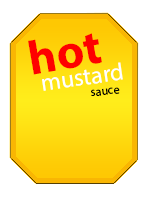
<style>
.page{position:relative;width:150px;height:200px;background:#ffffff}
.page>*{position:absolute;margin:0}
.t1{font:48px "MyriadPro-Bold";color:#fe0000}
.t2{font:24px "MyriadPro-Regular";color:#ffffff}
.t3{font:12px "MyriadPro-Regular";color:#000000}
</style>
<div class="page">
<p class="t1" style="left:28px;top:33px;width:74px;height:42px;rotate:-10deg">hot</p>
<p class="t2" style="left:42px;top:62px;width:81px;height:29px;rotate:-8deg">mustard</p>
<p class="t3" style="left:91px;top:87px;width:29px;height:9px;rotate:-7deg">sauce</p>
</div>
